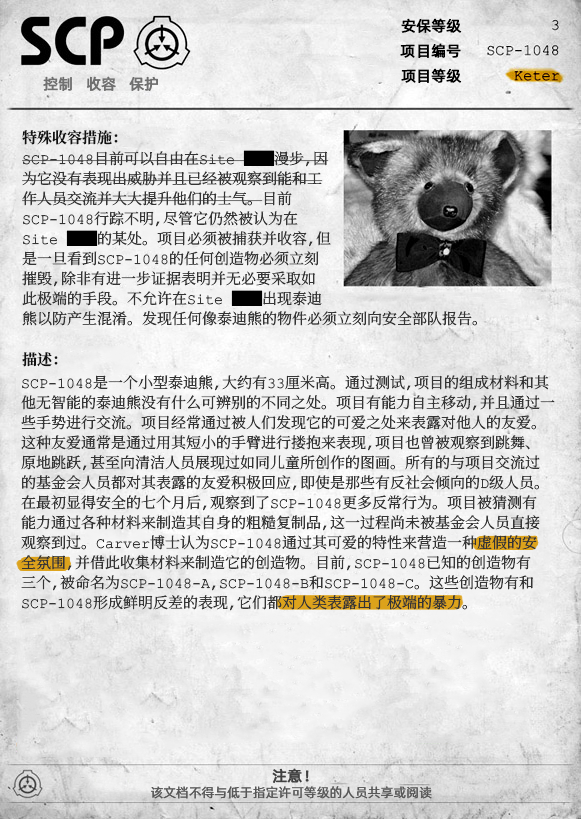
<style>
.page{position:relative;width:581px;height:819px}
.page>*{position:absolute;margin:0}
.t1{font:15px "AlibabaPuHuiTiR";color:#000000;font-weight:bold}
.t2{font:15px "AlibabaPuHuiTiR";color:#707070;font-weight:bold}
.t3{font:15px "ContainmentBreach-Bold";color:#121212}
.t4{font:15px/20px "ContainmentBreach-Regular";color:#353535}
.t5{font:15px/20px "ContainmentBreach-Regular";color:#000000}
.t6{font:15px "AlibabaPuHuiTiR";color:#414141;font-weight:bold}
.t7{font:13px "AlibabaPuHuiTiR";color:#575757}
</style>
<div class="page">
<p class="t1" style="left:401px;top:18px;width:61px;height:15px">安保等级</p>
<p class="t1" style="left:400px;top:43px;width:61px;height:15px">项目编号</p>
<p class="t2" style="left:43px;top:76px;width:115px;height:15px">控制   收容   保护</p>
<p class="t1" style="left:401px;top:68px;width:61px;height:15px">项目等级</p>
<p class="t3" style="left:22px;top:130px;width:96px;height:15px">特殊收容措施：</p>
<p class="t4" style="left:22px;top:150px;width:455px;height:176px">SCP-1048目前可以自由在Site <span class="t5">██</span>漫步，因<br>为它没有表现出威胁并且已经被观察到能和工<br>作人员交流并大大提升他们的士气。目前<br>SCP-1048行踪不明，尽管它仍然被认为在<br>Site <span class="t5">██</span>的某处。项目必须被捕获并收容，但<br>是一旦看到SCP-1048的任何创造物必须立刻<br>摧毁，除非有进一步证据表明并无必要采取如<br>此极端的手段。不允许在Site <span class="t5">██</span>出现泰迪<br>熊以防产生混淆。发现任何像泰迪熊的物件必须立刻向安全部队报告。</p>
<p class="t3" style="left:22px;top:352px;width:36px;height:15px">描述：</p>
<p class="t4" style="left:21px;top:375px;width:534px;height:236px">SCP-1048是一个小型泰迪熊，大约有33厘米高。通过测试，项目的组成材料和其<br>他无智能的泰迪熊没有什么可辨别的不同之处。项目有能力自主移动，并且通过一<br>些手势进行交流。项目经常通过被人们发现它的可爱之处来表露对他人的友爱。<br>这种友爱通常是通过用其短小的手臂进行搂抱来表现，项目也曾被观察到跳舞、<br>原地跳跃，甚至向清洁人员展现过如同儿童所创作的图画。所有的与项目交流过<br>的基金会人员都对其表露的友爱积极回应，即使是那些有反社会倾向的D级人员。<br>在最初显得安全的七个月后，观察到了SCP-1048更多反常行为。项目被猜测有<br>能力通过各种材料来制造其自身的粗糙复制品，这一过程尚未被基金会人员直接<br>观察到过。Carver博士认为SCP-1048通过其可爱的特性来营造一种虚假的安<br>全氛围，并借此收集材料来制造它的创造物。目前，SCP-1048已知的创造物有<br>三个，被命名为SCP-1048-A，SCP-1048-B和SCP-1048-C。这些创造物有和<br>SCP-1048形成鲜明反差的表现，它们都对人类表露出了极端的暴力。</p>
<p class="t6" style="left:272px;top:768px;width:37px;height:15px">注意！</p>
<p class="t7" style="left:151px;top:786px;width:281px;height:13px">该文档不得与低于指定许可等级的人员共享或阅读</p>
</div>
